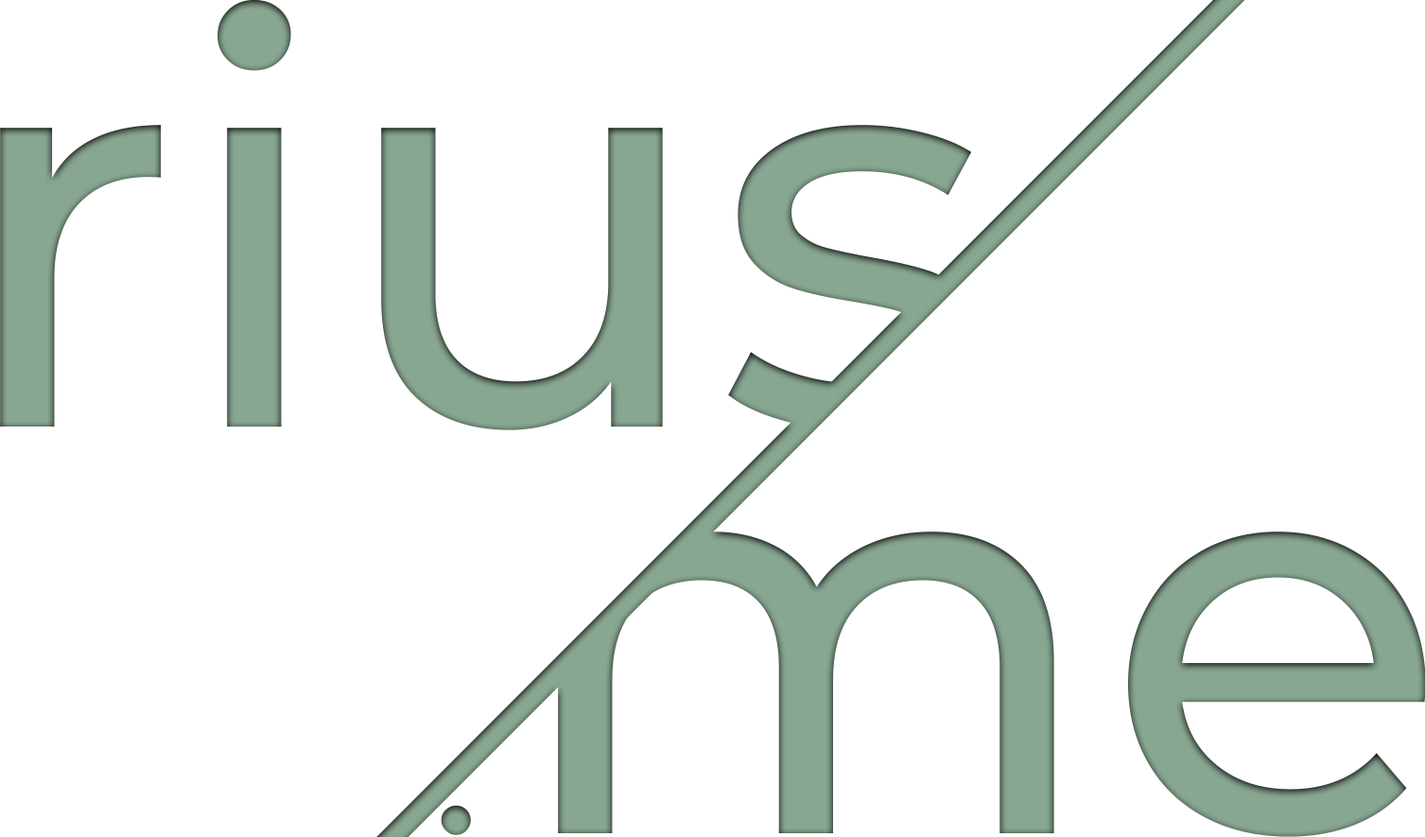
<style>
.page{position:relative;width:1425px;height:837px;background:#ffffff}
.page>*{position:absolute;margin:0}
.t1{font:563.4px "Montserrat-Medium";color:#88a792}
.t2{font:563.4px "Montserrat-Thin";color:#88a792}
</style>
<div class="page">
<p class="t1" style="left:0px;top:0px;width:981px;height:430px">rius</p>
<p class="t1" style="left:441px;top:531px;width:985px;height:306px"><span class="t2">.</span>me</p>
</div>
